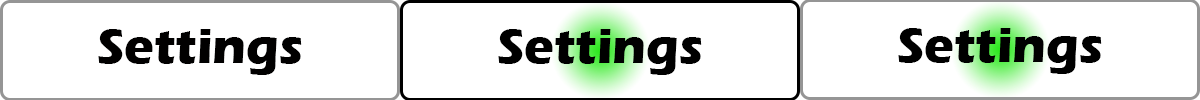
<style>
.page{position:relative;width:1200px;height:100px;background:#ffffff}
.page>*{position:absolute;margin:0}
.t1{font:50px "ErasITC-Bold";color:#010000}
.t2{font:50px "ErasITC-Bold";color:#000000}
</style>
<div class="page">
<p class="t1" style="left:98px;top:29px;width:204px;height:46px">Settings</p>
<p class="t2" style="left:498px;top:29px;width:204px;height:46px">Settings</p>
<p class="t2" style="left:898px;top:28px;width:204px;height:46px">Settings</p>
</div>
